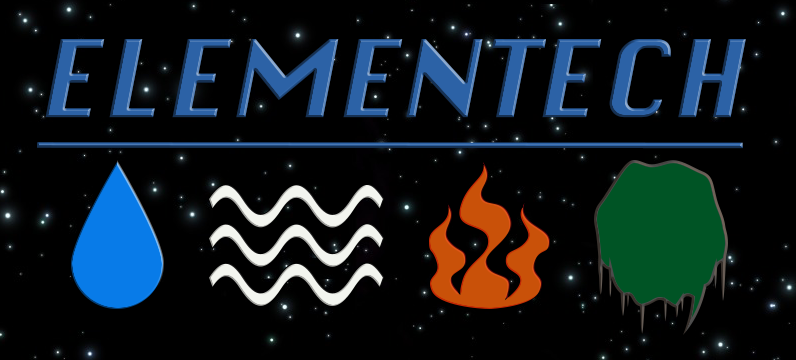
<style>
.page{position:relative;width:796px;height:360px;background:#000000}
.page>*{position:absolute;margin:0}
.t1{font:103.8px "Silom";font-weight:bold;font-style:italic;text-decoration:underline}
</style>
<div class="page">
<p class="t1" style="left:37px;top:39px;width:709px;height:110px">ELEMENTECH</p>
</div>
